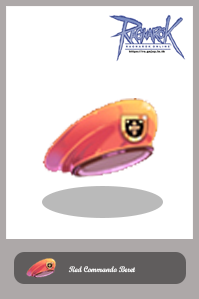
<style>
.page{position:relative;width:199px;height:299px;background:#ffffff}
.page>*{position:absolute;margin:0}
.t1{font:7.9px "ScriptMTBold";color:#ffffff;scale:0.96 1}
</style>
<div class="page">
<p class="t1" style="left:68px;top:266px;width:68px;height:7px">Red Commando Beret</p>
</div>
